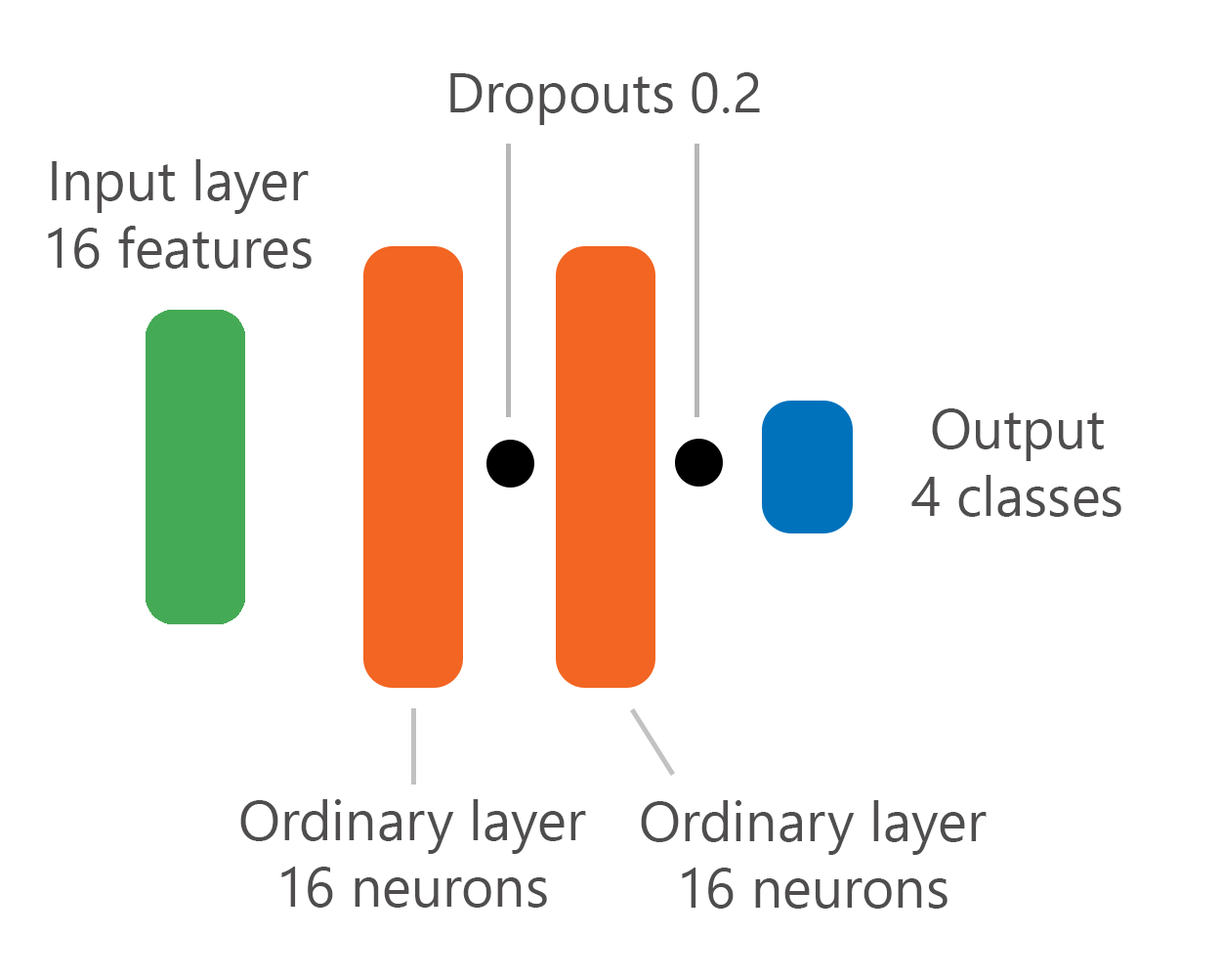
<style>
.page{position:relative;width:1221px;height:977px;background:#ffffff}
.page>*{position:absolute;margin:0}
.t1{font:55.7px "NirmalaUI";color:#4f4d4d}
</style>
<div class="page">
<p class="t1" style="left:450px;top:72px;width:310px;height:53px">Dropouts 0.2</p>
<p class="t1" style="left:48px;top:159px;width:264px;height:110px;text-align:center">Input layer<br>16 features</p>
<p class="t1" style="left:911px;top:408px;width:210px;height:109px;text-align:center">Output<br>4 classes</p>
<p class="t1" style="left:240px;top:799px;width:346px;height:108px;text-align:center">Ordinary layer<br>16 neurons</p>
<p class="t1" style="left:641px;top:800px;width:345px;height:108px;text-align:center">Ordinary layer<br>16 neurons</p>
</div>
